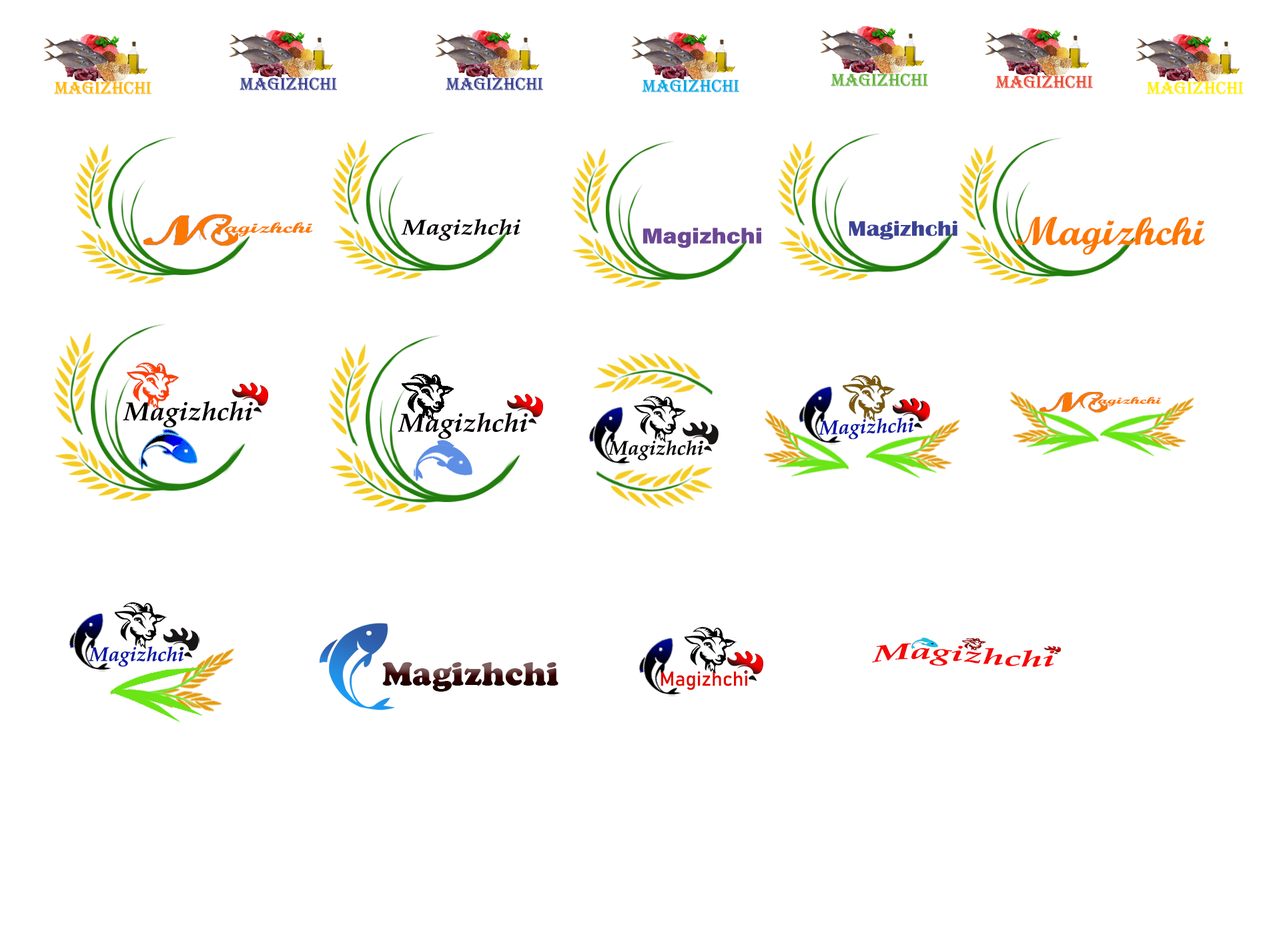
<style>
.page{position:relative;width:1261px;height:946px;background:#ffffff}
.page>*{position:absolute;margin:0}
.t1{font:17.9px "Algerian";color:#3c4395}
.t2{font:17.9px "Algerian";color:#65b33b}
.t3{font:17.9px "Algerian";color:#e84f36}
.t4{font:17.9px "Algerian";color:#fbb900}
.t5{font:17.9px "Algerian";color:#00aae5}
.t6{font:17.9px "Algerian";color:#ffee01}
.t7{font:15px "ScriptMTBold";color:#fc7801;scale:1.78 1}
.t8{font:21.6px "BookAntiqua-BoldItalic";color:#050000;scale:1.16 1}
.t9{font:21.6px "BritannicBold";color:#3c4395;scale:1.16 1}
.t10{font:39.9px "ScriptMTBold";color:#fc7801;scale:1.11 1}
.t11{font:21.6px "AcuminConcept-SemiCondensedBlack";color:#6c4795;scale:1.16 1}
.t12{font:26px "BookAntiqua-BoldItalic";color:#050000;scale:1.05 1}
.t13{font:9.8px "ScriptMTBold";color:#fc7801;scale:1.95 1}
.t14{font:20px "BookAntiqua-BoldItalic";color:#0717a6}
.t15{font:20px "BookAntiqua-BoldItalic";color:#050000}
.t16{font:22.4px "BookAntiqua-BoldItalic";color:#f30909;scale:1.71 1}
.t17{font:33.2px "CooperBlack";scale:1.03 1}
.t18{font:20px "Bahnschrift";color:#e10801}
</style>
<div class="page">
<p class="t1" style="left:240px;top:77px;width:97px;height:14px">Magizhchi</p>
<p class="t1" style="left:446px;top:77px;width:97px;height:14px">Magizhchi</p>
<p class="t2" style="left:831px;top:73px;width:97px;height:14px">Magizhchi</p>
<p class="t3" style="left:996px;top:75px;width:97px;height:14px">Magizhchi</p>
<p class="t4" style="left:54px;top:81px;width:97px;height:14px">Magizhchi</p>
<p class="t5" style="left:642px;top:79px;width:97px;height:14px">Magizhchi</p>
<p class="t6" style="left:1146px;top:81px;width:98px;height:14px">Magizhchi</p>
<p class="t7" style="left:224px;top:222px;width:89px;height:15px">agizhchi</p>
<p class="t8" style="left:401px;top:218px;width:119px;height:23px">Magizhchi</p>
<p class="t9" style="left:849px;top:220px;width:109px;height:20px">Magizhchi</p>
<p class="t10" style="left:1016px;top:216px;width:189px;height:39px">Magizhchi</p>
<p class="t11" style="left:643px;top:228px;width:118px;height:20px">Magizhchi</p>
<p class="t12" style="left:123px;top:401px;width:130px;height:27px">Magizhchi</p>
<p class="t13" style="left:1098px;top:396px;width:64px;height:10px">agizhchi</p>
<p class="t12" style="left:398px;top:412px;width:130px;height:27px">Magizhchi</p>
<p class="t14" style="left:819px;top:417px;width:95px;height:22px;rotate:-2deg">Magizhchi</p>
<p class="t15" style="left:608px;top:440px;width:96px;height:20px">Magizhchi</p>
<p class="t14" style="left:89px;top:646px;width:95px;height:21px">Magizhchi</p>
<p class="t16" style="left:872px;top:643px;width:183px;height:24px">Magizhchi</p>
<p class="t17" style="left:382px;top:662px;width:177px;height:29px">Magizhchi</p>
<p class="t18" style="left:661px;top:671px;width:86px;height:19px">Magizhchi</p>
</div>
